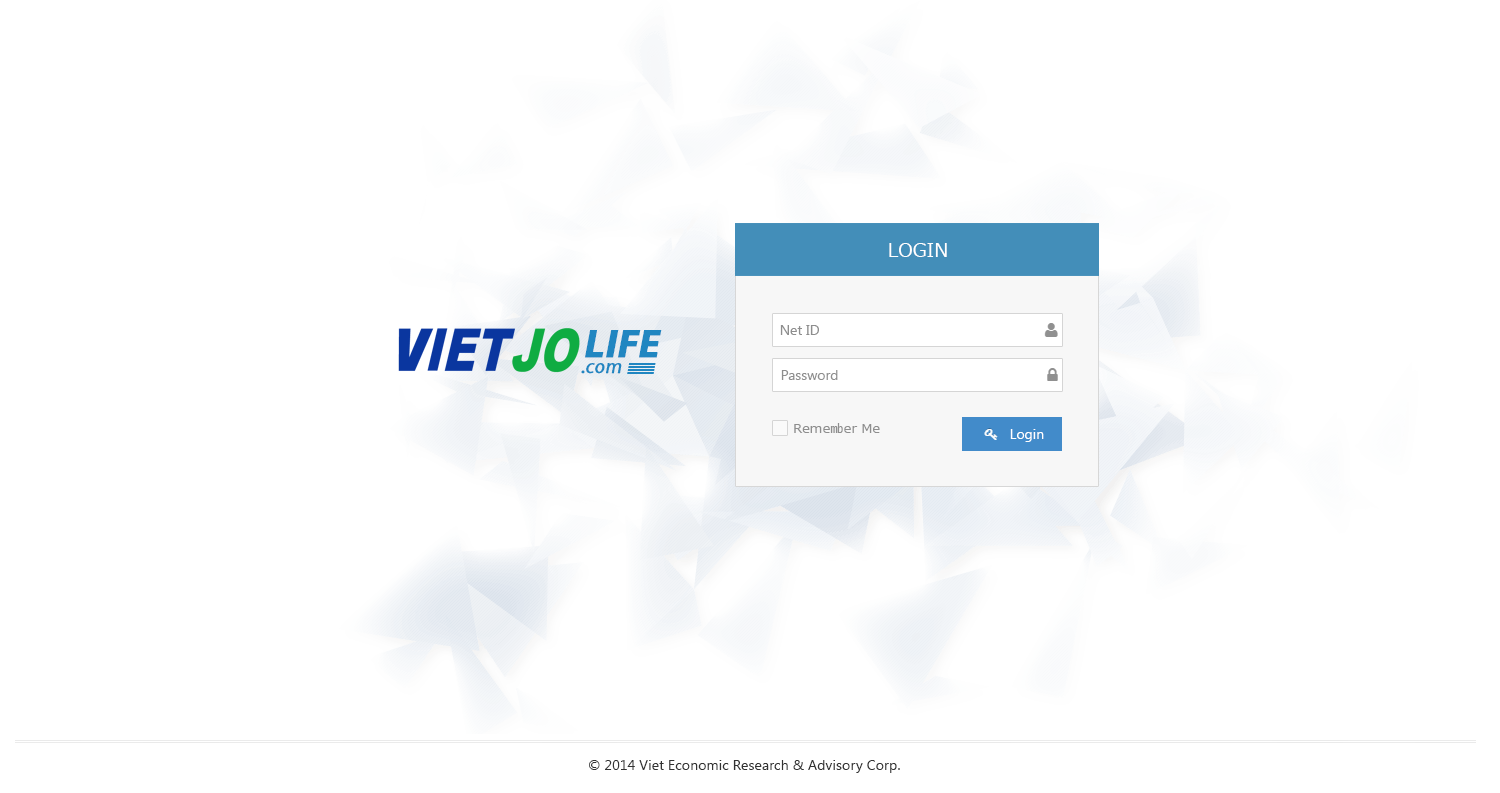
<style>
.page{position:relative;width:1500px;height:793px;background:#ffffff}
.page>*{position:absolute;margin:0}
.t1{font:19px "Meiryo";color:#ffffff}
.t2{font:14px "SegoeUI";color:#8e8e8e}
.t3{font:40px "MyriadPro-BoldIt";color:#2086c1;font-weight:bold}
.t4{font:20px "MyriadPro-It";color:#2086c1;font-weight:bold}
.t5{font:13.3px "Meiryo";color:#8e8e8e}
.t6{font:14px "SegoeUI";color:#ffffff}
.t7{font:14px "SegoeUI";letter-spacing:0.01em;color:#333333}
</style>
<div class="page">
<p class="t1" style="left:889px;top:243px;width:58px;height:14px">LOGIN</p>
<p class="t2" style="left:780px;top:325px;width:39px;height:10px">Net ID</p>
<p class="t3" style="left:585px;top:330px;width:77px;height:28px">LIFE</p>
<p class="t4" style="left:581px;top:363px;width:41px;height:11px">.com</p>
<p class="t2" style="left:781px;top:370px;width:57px;height:10px">Password</p>
<p class="t5" style="left:794px;top:423px;width:86px;height:10px">Remember Me</p>
<p class="t6" style="left:1010px;top:429px;width:34px;height:13px">Login</p>
<p class="t7" style="left:589px;top:760px;width:311px;height:13px">© 2014 Viet Economic Research &amp; Advisory Corp.</p>
</div>
